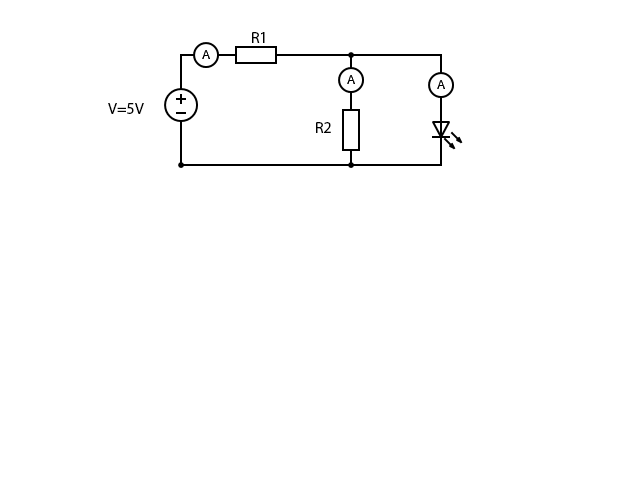
<style>
.page{position:relative;width:640px;height:480px;background:#ffffff}
.page>*{position:absolute;margin:0}
.t1{font:12px "MyriadPro-Regular";color:#000000}
</style>
<div class="page">
<p class="t1" style="left:252px;top:32px;width:13px;height:11px">R1</p>
<p class="t1" style="left:108px;top:103px;width:36px;height:11px">V=5V</p>
<p class="t1" style="left:316px;top:122px;width:15px;height:11px">R2</p>
</div>
